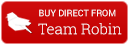
<style>
.page{position:relative;width:129px;height:45px}
.page>*{position:absolute;margin:0}
.t1{font:9px "Roboto-Regular";color:#ffffff;text-transform:uppercase}
.t2{font:15px "RobotoSlab-Light";color:#ffffff}
</style>
<div class="page">
<p class="t1" style="left:39px;top:9px;width:77px;height:8px">BUY DIRECT FROM</p>
<p class="t2" style="left:38px;top:23px;width:84px;height:12px">Team Robin</p>
</div>
